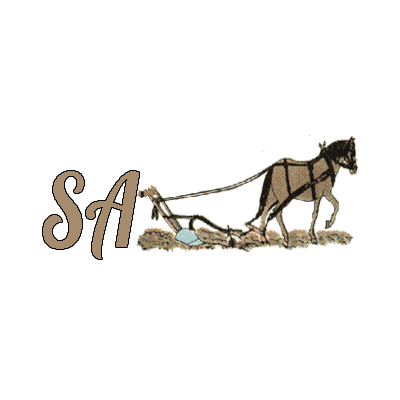
<style>
.page{position:relative;width:400px;height:400px;background:#ffffff}
.page>*{position:absolute;margin:0}
.t1{font:100.9px "Lobster1.4";color:#a68b6c;scale:0.78 1}
</style>
<div class="page">
<p class="t1" style="left:43px;top:171px;width:96px;height:88px">SA</p>
</div>
